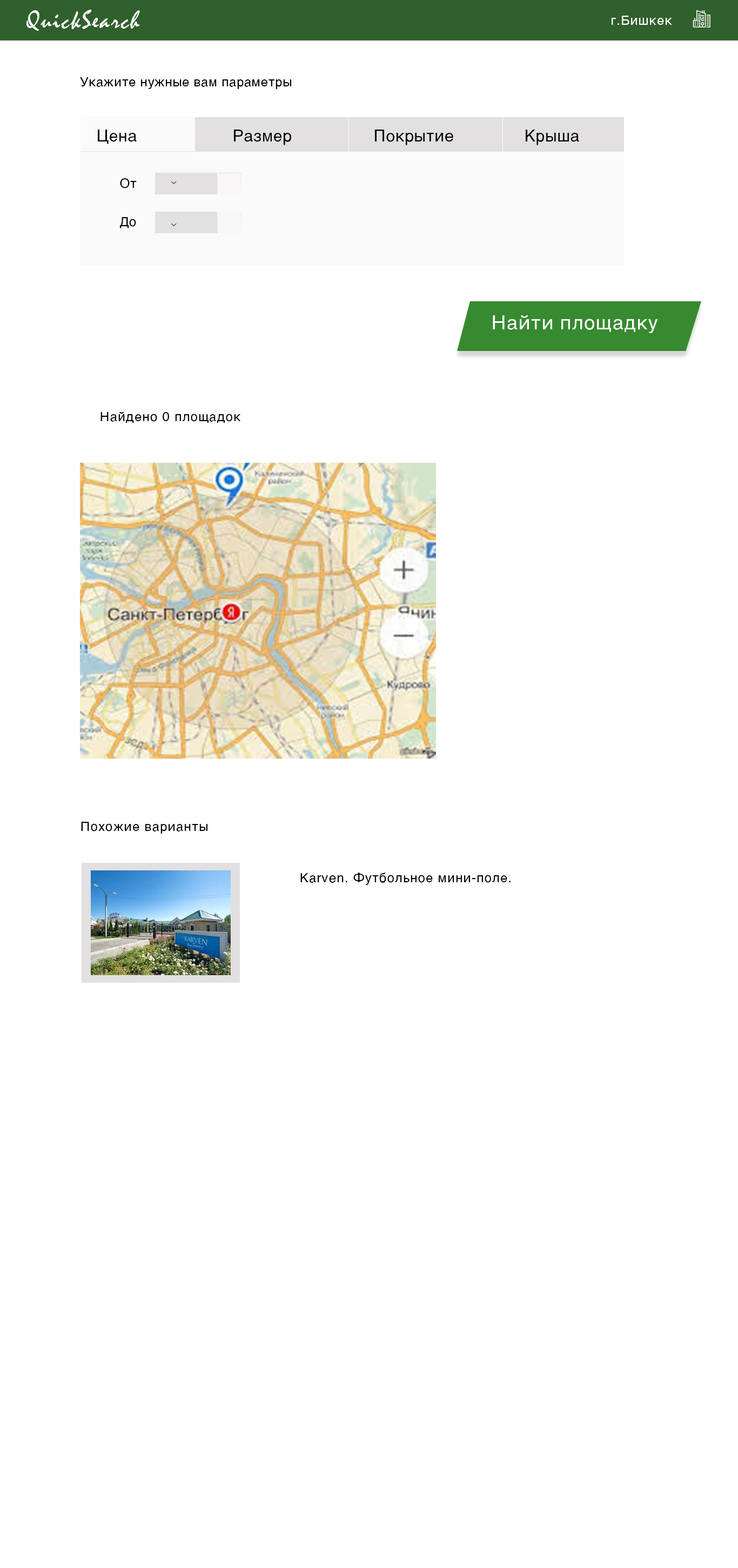
<style>
.page{position:relative;width:738px;height:1568px;background:#ffffff}
.page>*{position:absolute;margin:0}
.t1{font:25.9px "Mistral";letter-spacing:0.05em;color:#ffffff}
.t2{font:13px "Helvetica-Regular";letter-spacing:0.05em;color:#ffffff}
.t3{font:13px "Helvetica-Regular";letter-spacing:0.025em;color:#010101}
.t4{font:16.2px "Helvetica-Regular";letter-spacing:0.025em;color:#000000}
.t5{font:13px "Helvetica-Regular";letter-spacing:0.025em;color:#020202}
.t6{font:19.4px "Helvetica-Regular";letter-spacing:0.05em;color:#ffffff}
.t7{font:13px "Helvetica-Regular";letter-spacing:0.05em;color:#030303}
</style>
<div class="page">
<p class="t1" style="left:26px;top:9px;width:114px;height:22px">QuickSearch</p>
<p class="t2" style="left:611px;top:16px;width:61px;height:9px">г.Бишкек</p>
<p class="t3" style="left:80px;top:77px;width:211px;height:12px">Укажите нужные вам параметры</p>
<p class="t4" style="left:98px;top:130px;width:481px;height:15px">Цена     Размер     Покрытие    Крыша</p>
<p class="t5" style="left:120px;top:178px;width:17px;height:10px">От</p>
<p class="t5" style="left:120px;top:217px;width:16px;height:11px">До</p>
<p class="t6" style="left:492px;top:315px;width:166px;height:18px">Найти площадку</p>
<p class="t7" style="left:100px;top:411px;width:140px;height:12px">Найдено 0 площадок</p>
<p class="t7" style="left:81px;top:822px;width:126px;height:12px">Похожие варианты</p>
<p class="t7" style="left:300px;top:873px;width:210px;height:12px">Karven. Футбольное мини-поле.</p>
</div>
